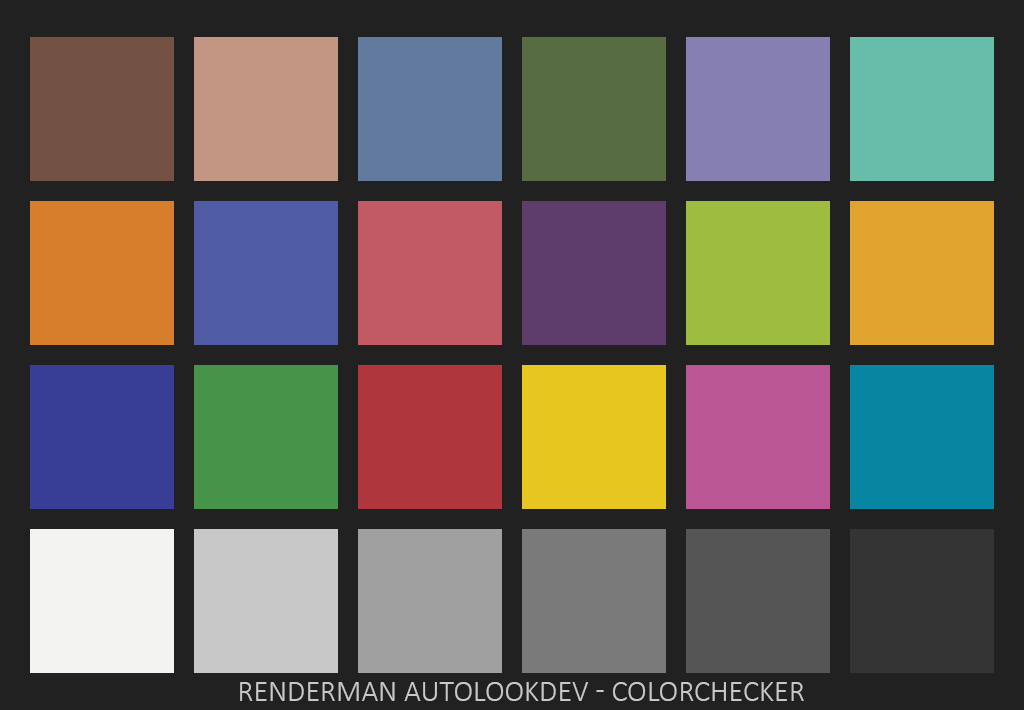
<style>
.page{position:relative;width:1024px;height:710px;background:#212121}
.page>*{position:absolute;margin:0}
.t1{font:30px "Calibri-Light";color:#c8c8c8;text-transform:uppercase}
</style>
<div class="page">
<p class="t1" style="left:240px;top:682px;width:564px;height:19px">RENDERMAN AutoLookdev - ColorChecker</p>
</div>
